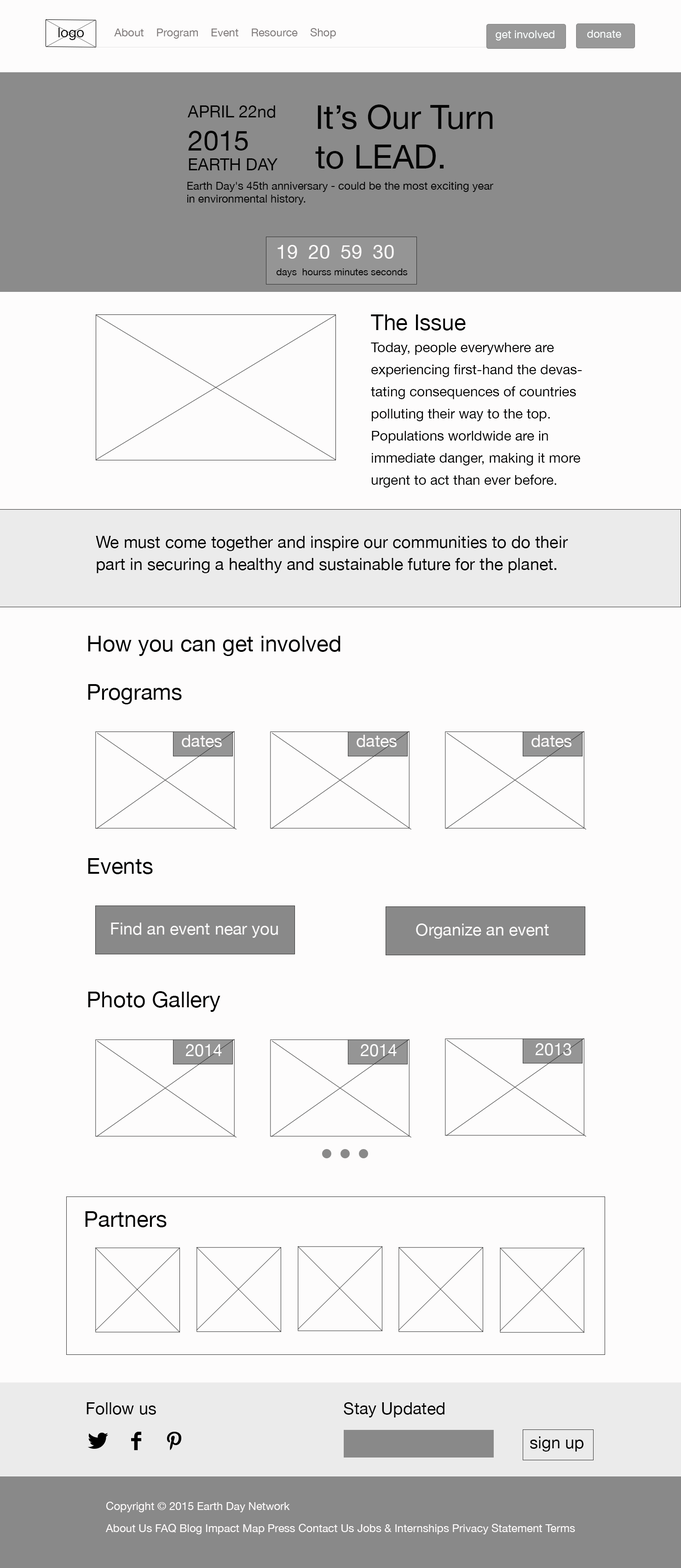
<style>
.page{position:relative;width:681px;height:1568px;background:#fdfcfc}
.page>*{position:absolute;margin:0}
.t1{font:13.8px "HelveticaNeue";color:#050505}
.t2{font:11px "HelveticaNeue";color:#817c7c}
.t3{font:11px "HelveticaNeue";color:#fafefe}
.t4{font:16.6px "HelveticaNeue";color:#050505}
.t5{font:27.6px "HelveticaNeue";color:#050505}
.t6{font:33.1px "HelveticaNeue";color:#050505}
.t7{font:11px "HelveticaNeue";color:#050505}
.t8{font:19.4px "HelveticaNeue";color:#fbf9f9}
.t9{font:9.7px "HelveticaNeue";color:#050505}
.t10{font:13.8px/22.1px "HelveticaNeue";color:#020202}
.t11{font:22.1px/22.1px "HelveticaNeue";color:#020202}
.t12{font:16.6px/22.1px "HelveticaNeue";color:#020202}
.t13{font:22.1px "HelveticaNeue";color:#020202}
.t14{font:16.6px "HelveticaNeue";color:#fefbfb}
.t15{font:16.6px "HelveticaNeue";color:#fbfafa}
.t16{font:16.6px "HelveticaNeue";color:#fefefe}
.t17{font:16.6px "HelveticaNeue";color:#020202}
.t18{font:11px/22.1px "HelveticaNeue";color:#fefbfb}
</style>
<div class="page">
<p class="t1" style="left:58px;top:28px;width:26px;height:12px">logo</p>
<p class="t2" style="left:114px;top:28px;width:222px;height:11px">About    Program    Event    Resource    Shop</p>
<p class="t3" style="left:587px;top:30px;width:34px;height:8px">donate</p>
<p class="t3" style="left:496px;top:30px;width:59px;height:11px">get involved</p>
<p class="t4" style="left:187px;top:105px;width:91px;height:65px">APRIL 22nd<br><span class="t5">2015<br></span>EARTH DAY</p>
<p class="t6" style="left:315px;top:105px;width:178px;height:64px">It’s Our Turn<br>to LEAD.</p>
<p class="t7" style="left:187px;top:182px;width:307px;height:23px">Earth Day's 45th anniversary - could be the most exciting year in environmental history.</p>
<p class="t8" style="left:278px;top:245px;width:116px;height:14px">19  20  59  30</p>
<p class="t9" style="left:276px;top:268px;width:132px;height:9px">days  hourss minutes seconds</p>
<p class="t10" style="left:371px;top:314px;width:211px;height:174px"><span class="t11">The Issue<br></span>Today, people everywhere are<br>experiencing first-hand the devastating consequences of countries polluting their way to the top. <br>Populations worldwide are in<br>immediate danger, making it more urgent to act than ever before.</p>
<p class="t12" style="left:96px;top:536px;width:472px;height:37px">We must come together and inspire our communities to do their part in securing a healthy and sustainable future for the planet.</p>
<p class="t13" style="left:88px;top:636px;width:253px;height:20px">How you can get involved</p>
<p class="t13" style="left:88px;top:684px;width:94px;height:20px">Programs</p>
<p class="t14" style="left:182px;top:735px;width:40px;height:12px">dates</p>
<p class="t14" style="left:357px;top:735px;width:40px;height:12px">dates</p>
<p class="t14" style="left:532px;top:735px;width:40px;height:12px">dates</p>
<p class="t13" style="left:88px;top:858px;width:65px;height:16px">Events</p>
<p class="t15" style="left:111px;top:923px;width:167px;height:15px">Find an event near you</p>
<p class="t15" style="left:416px;top:923px;width:133px;height:16px">Organize an event</p>
<p class="t13" style="left:88px;top:991px;width:133px;height:21px">Photo Gallery</p>
<p class="t16" style="left:186px;top:1044px;width:36px;height:13px">2014</p>
<p class="t16" style="left:360px;top:1044px;width:37px;height:13px">2014</p>
<p class="t16" style="left:535px;top:1043px;width:37px;height:13px">2013</p>
<p class="t13" style="left:85px;top:1211px;width:82px;height:16px">Partners</p>
<p class="t17" style="left:87px;top:1402px;width:69px;height:13px">Follow us</p>
<p class="t17" style="left:344px;top:1402px;width:101px;height:15px">Stay Updated</p>
<p class="t17" style="left:530px;top:1436px;width:54px;height:16px">sign up</p>
<p class="t18" style="left:105px;top:1502px;width:470px;height:32px">Copyright © 2015 Earth Day Network<br>About Us FAQ Blog Impact Map Press Contact Us Jobs &amp; Internships Privacy Statement Terms</p>
</div>
